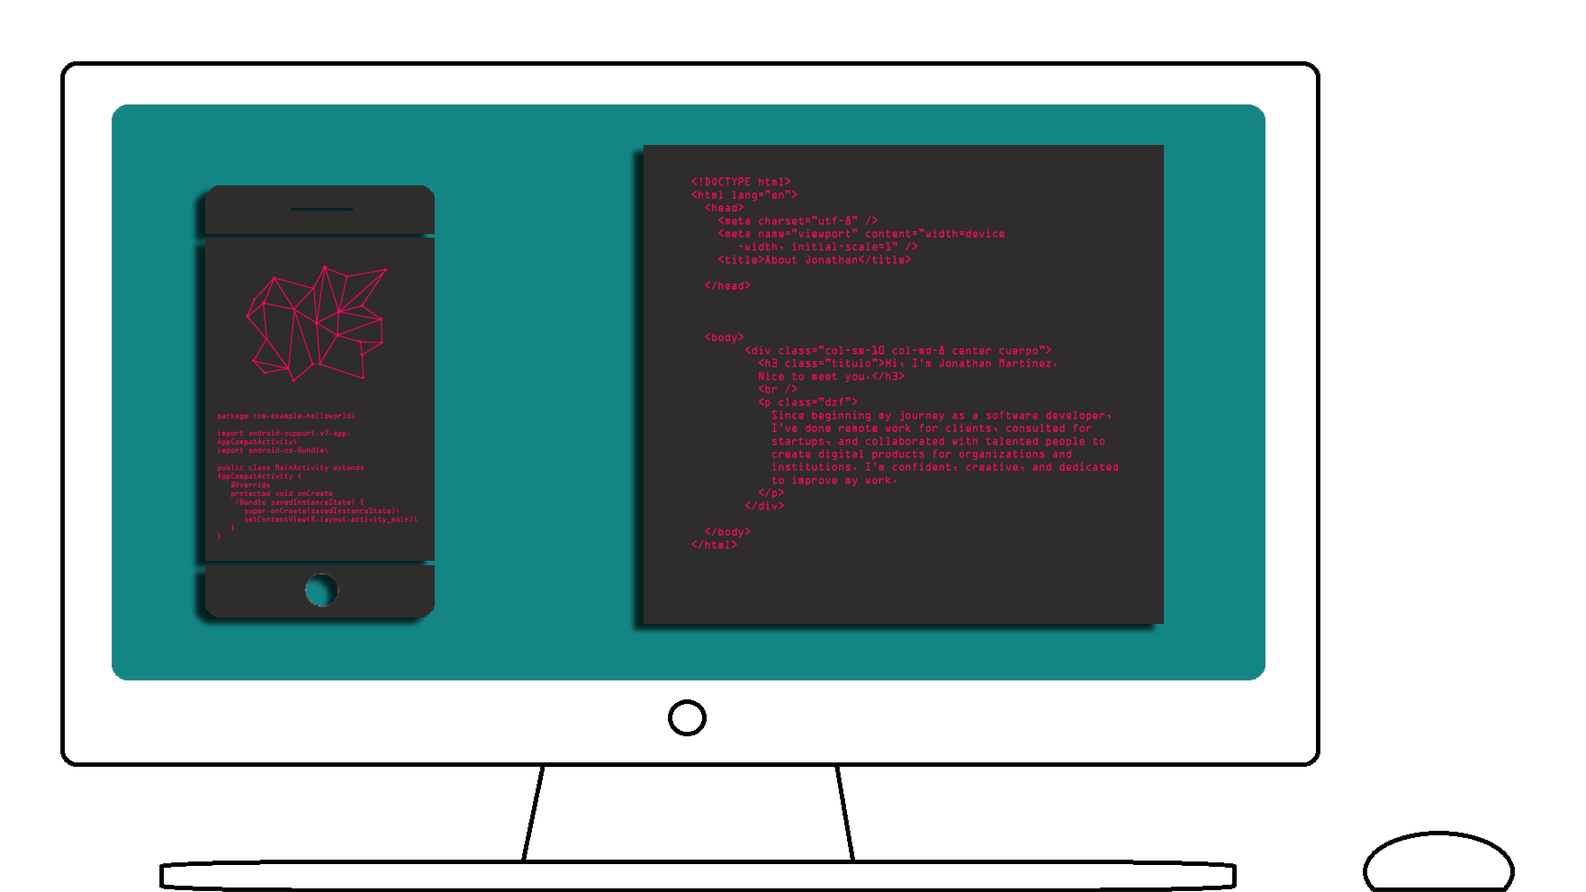
<style>
.page{position:relative;width:1586px;height:892px;background:#ffffff}
.page>*{position:absolute;margin:0}
.t1{font:10.8px "OCRAStd";color:#ff0066;scale:0.86 1}
.t2{font:7.2px "OCRAStd";color:#ff0066;scale:0.86 1}
</style>
<div class="page">
<p class="t1" style="left:691px;top:177px;width:427px;height:372px">&lt;!DOCTYPE html&gt;<br>&lt;html lang="en"&gt;<br>  &lt;head&gt;<br>    &lt;meta charset="utf-8" /&gt;<br>    &lt;meta name="viewport" content="width=device<br>       -width, initial-scale=1" /&gt;<br>    &lt;title&gt;About Jonathan&lt;/title&gt;<br><br>  &lt;/head&gt;<br><br><br><br>  &lt;body&gt;<br>        &lt;div class="col-sm-10 col-md-8 center cuerpo"&gt;<br>          &lt;h3 class="titulo"&gt;Hi, I'm Jonathan Martínez. <br>          Nice to meet you.&lt;/h3&gt;<br>          &lt;br /&gt;<br>          &lt;p class="dzf"&gt;<br>            Since beginning my journey as a software developer, <br>            I've done remote work for clients, consulted for <br>            startups, and collaborated with talented people to <br>            create digital products for organizations and<br>            institutions. I'm confident, creative, and dedicated <br>            to improve my work.<br>          &lt;/p&gt;<br>        &lt;/div&gt;<br><br>  &lt;/body&gt;<br>&lt;/html&gt;</p>
<p class="t2" style="left:218px;top:412px;width:199px;height:127px">package com.example.helloworld;<br><br>import android.support.v7.app.<br>AppCompatActivity;<br>import android.os.Bundle;<br><br>public class MainActivity extends <br>AppCompatActivity {<br>   @Override<br>   protected void onCreate<br>    (Bundle savedInstanceState) {<br>      super.onCreate(savedInstanceState);<br>      setContentView(R.layout.activity_main);<br>   }<br>}</p>
</div>
